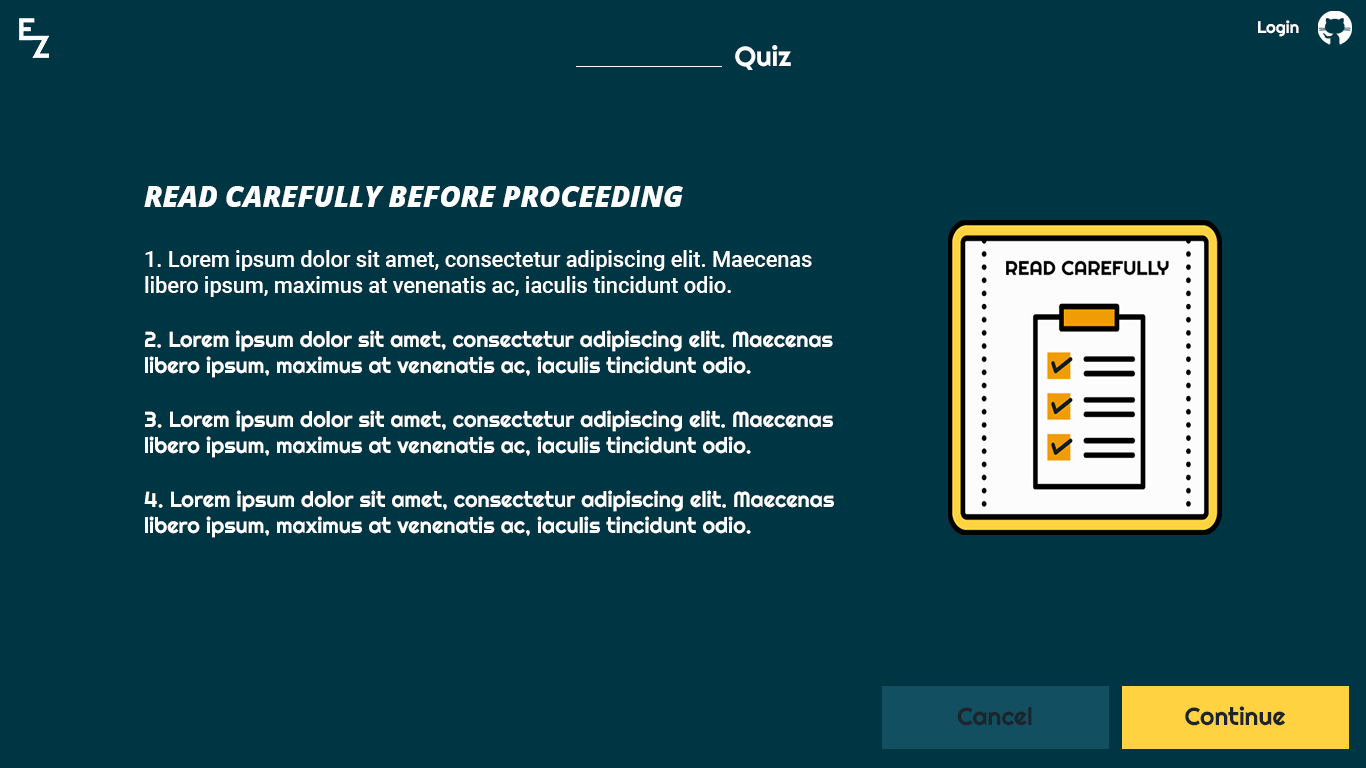
<style>
.page{position:relative;width:1366px;height:768px;background:#003644}
.page>*{position:absolute;margin:0}
.t1{font:16.7px "Righteous-Regular";color:#ffffff}
.t2{font:27.7px "Righteous-Regular";color:#ffffff}
.t3{font:28.7px "OpenSans-ExtraBoldItalic";color:#ffffff}
.t4{font:21.7px/26.1px "Roboto-Medium";color:#ffffff}
.t5{font:21.7px/26.1px "Righteous-Regular";color:#ffffff}
.t6{font:24.7px "Righteous-Regular";color:#1d252c}
</style>
<div class="page">
<p class="t1" style="left:1258px;top:20px;width:41px;height:17px">Login</p>
<p class="t2" style="left:735px;top:45px;width:56px;height:25px">Quiz</p>
<p class="t3" style="left:144px;top:186px;width:539px;height:21px">READ CAREFULLY BEFORE PROCEEDING</p>
<p class="t4" style="left:145px;top:250px;width:667px;height:47px">1. Lorem ipsum dolor sit amet, consectetur adipiscing elit. Maecenas <br>libero ipsum, maximus at venenatis ac, iaculis tincidunt odio.</p>
<p class="t5" style="left:145px;top:330px;width:688px;height:48px">2. Lorem ipsum dolor sit amet, consectetur adipiscing elit. Maecenas <br>libero ipsum, maximus at venenatis ac, iaculis tincidunt odio.</p>
<p class="t5" style="left:145px;top:410px;width:688px;height:48px">3. Lorem ipsum dolor sit amet, consectetur adipiscing elit. Maecenas <br>libero ipsum, maximus at venenatis ac, iaculis tincidunt odio.</p>
<p class="t5" style="left:144px;top:490px;width:690px;height:48px">4. Lorem ipsum dolor sit amet, consectetur adipiscing elit. Maecenas <br>libero ipsum, maximus at venenatis ac, iaculis tincidunt odio.</p>
<p class="t6" style="left:957px;top:707px;width:75px;height:19px">Cancel</p>
<p class="t6" style="left:1185px;top:706px;width:100px;height:20px">Continue</p>
</div>
